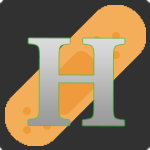
<style>
.page{position:relative;width:150px;height:150px;background:#313131}
.page>*{position:absolute;margin:0}
.t1{font:133.3px "MinionConceptRoman-Bold"}
</style>
<div class="page">
<p class="t1" style="left:28px;top:38px;width:97px;height:88px">H</p>
</div>
